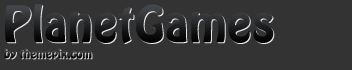
<style>
.page{position:relative;width:352px;height:70px;background:#333333}
.page>*{position:absolute;margin:0}
.t1{font:44px "HoboStd";font-weight:bold}
.t2{font:11px "HoboStd";font-weight:bold}
</style>
<div class="page">
<p class="t1" style="left:5px;top:4px;width:269px;height:39px">PlanetGames</p>
<p class="t2" style="left:4px;top:48px;width:88px;height:11px">by themepix.com</p>
</div>
